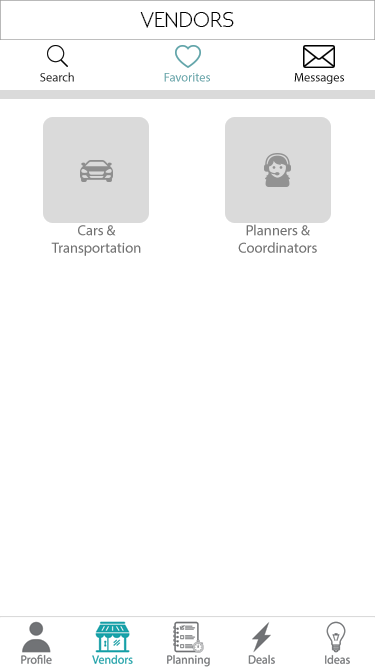
<style>
.page{position:relative;width:375px;height:667px;background:#ffffff}
.page>*{position:absolute;margin:0}
.t1{font:21.9px "NEOTERIC";color:#000000}
.t2{font:12.5px "MyriadPro-Regular";color:#050505}
.t3{font:12.5px "MyriadPro-Regular";color:#71bcc1}
.t4{font:12.5px "MyriadPro-Regular";color:#000000}
.t5{font:14.6px "MyriadPro-Regular";color:#838383}
</style>
<div class="page">
<p class="t1" style="left:140px;top:12px;width:94px;height:16px">VENDORS</p>
<p class="t2" style="left:40px;top:72px;width:34px;height:10px">Search</p>
<p class="t3" style="left:164px;top:73px;width:46px;height:9px">Favorites</p>
<p class="t4" style="left:294px;top:73px;width:50px;height:11px">Messages</p>
<p class="t5" style="left:51px;top:225px;width:90px;height:31px;text-align:center">Cars &amp;<br>Transportation</p>
<p class="t5" style="left:238px;top:224px;width:79px;height:29px;text-align:center">Planners &amp;<br>Coordinators</p>
</div>
